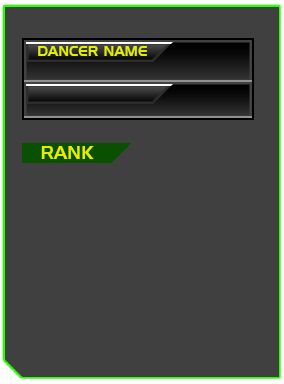
<style>
.page{position:relative;width:284px;height:384px;background:#404040}
.page>*{position:absolute;margin:0}
.t1{font:14px "HandelGothicBT-Regular";color:#e2ee00}
.t2{font:18px "HandelGothicBT-Regular";color:#e2ee00}
</style>
<div class="page">
<p class="t1" style="left:38px;top:46px;width:109px;height:10px">DANCER NAME</p>
<p class="t2" style="left:41px;top:146px;width:53px;height:13px">RANK</p>
</div>
